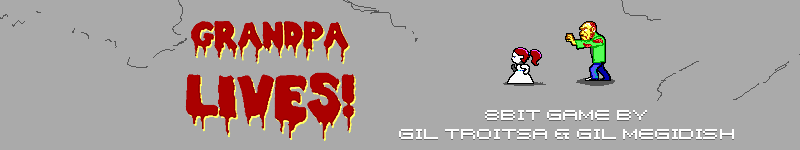
<style>
.page{position:relative;width:800px;height:150px;background:#aaaaaa}
.page>*{position:absolute;margin:0}
.t1{font:10px/19px "Birdy";color:#ffffff}
</style>
<div class="page">
<p class="t1" style="left:399px;top:110px;width:335px;height:29px;text-align:center">8bit game By <br>Gil Troitsa &amp; Gil Megidish</p>
</div>
